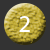
<style>
.page{position:relative;width:50px;height:50px;background:#333333}
.page>*{position:absolute;margin:0}
.t1{font:24px "MyriadPro-Regular";color:#ffffff}
</style>
<div class="page">
<p class="t1" style="left:19px;top:16px;width:11px;height:16px">2</p>
</div>
